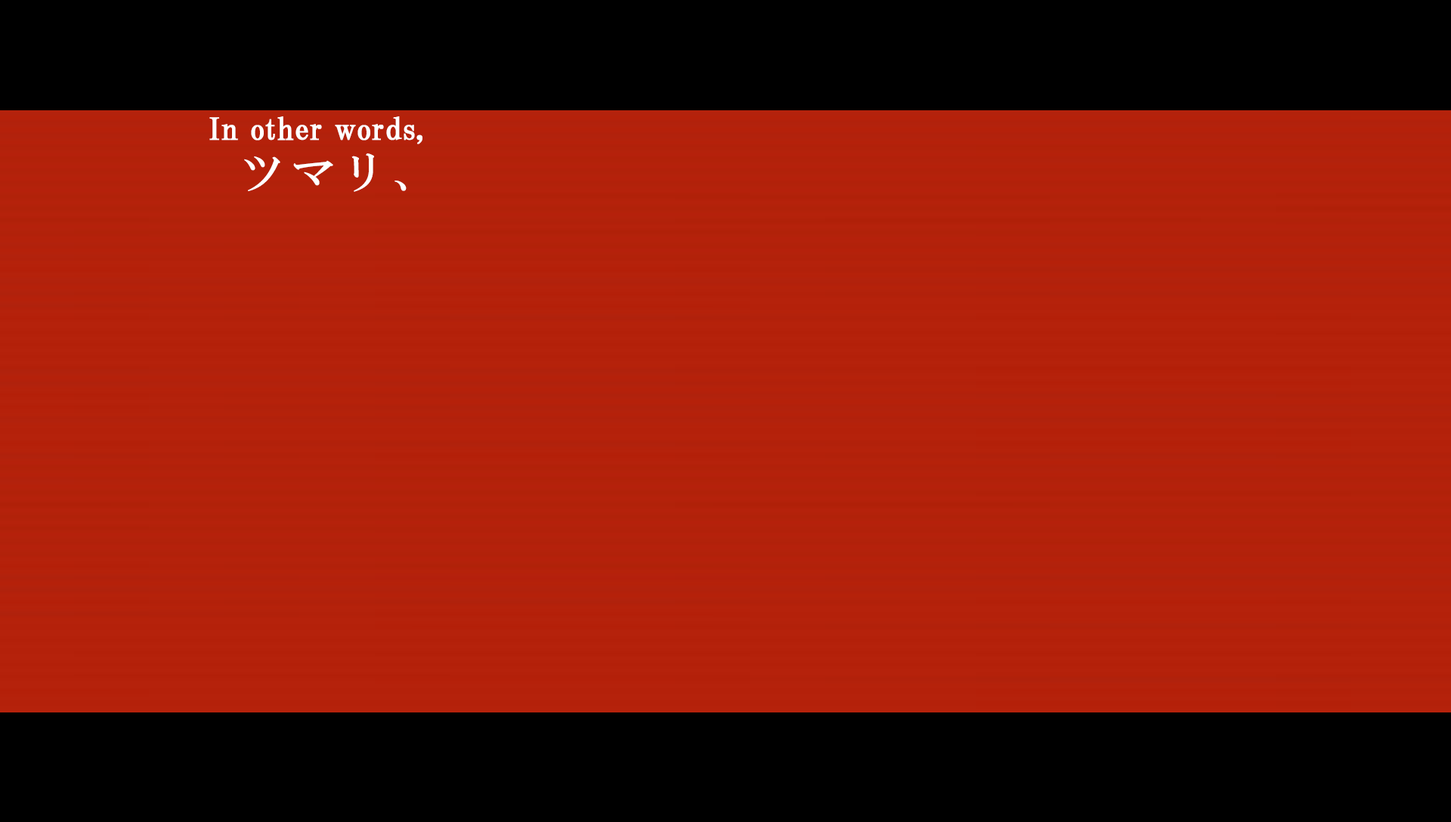
<style>
.page{position:relative;width:1451px;height:822px;background:#000000}
.page>*{position:absolute;margin:0}
.t1{font:30.2px "HGPMinchoB";letter-spacing:0.01em;color:#ffffff;font-weight:bold}
.t2{font:43.8px "HGMinchoB";letter-spacing:0.16em;color:#ffffff}
</style>
<div class="page">
<p class="t1" style="left:209px;top:116px;width:213px;height:28px">In other words,</p>
<p class="t2" style="left:244px;top:153px;width:162px;height:39px">ツマリ、</p>
</div>
